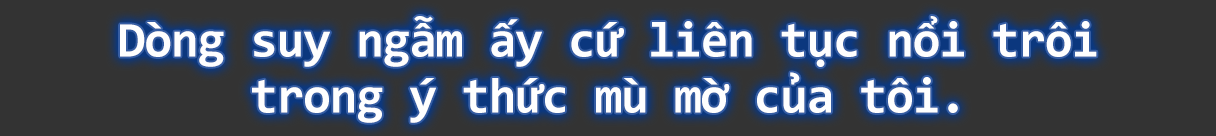
<style>
.page{position:relative;width:1216px;height:136px;background:#333333}
.page>*{position:absolute;margin:0}
.t1{font:50px/48px "Consolas-Bold";letter-spacing:-0.02em;color:#fefefe}
</style>
<div class="page">
<p class="t1" style="left:120px;top:16px;width:977px;height:107px;text-align:center">Dòng suy ngẫm ấy cứ liên tục nổi trôi<br>trong ý thức mù mờ của tôi.</p>
</div>
